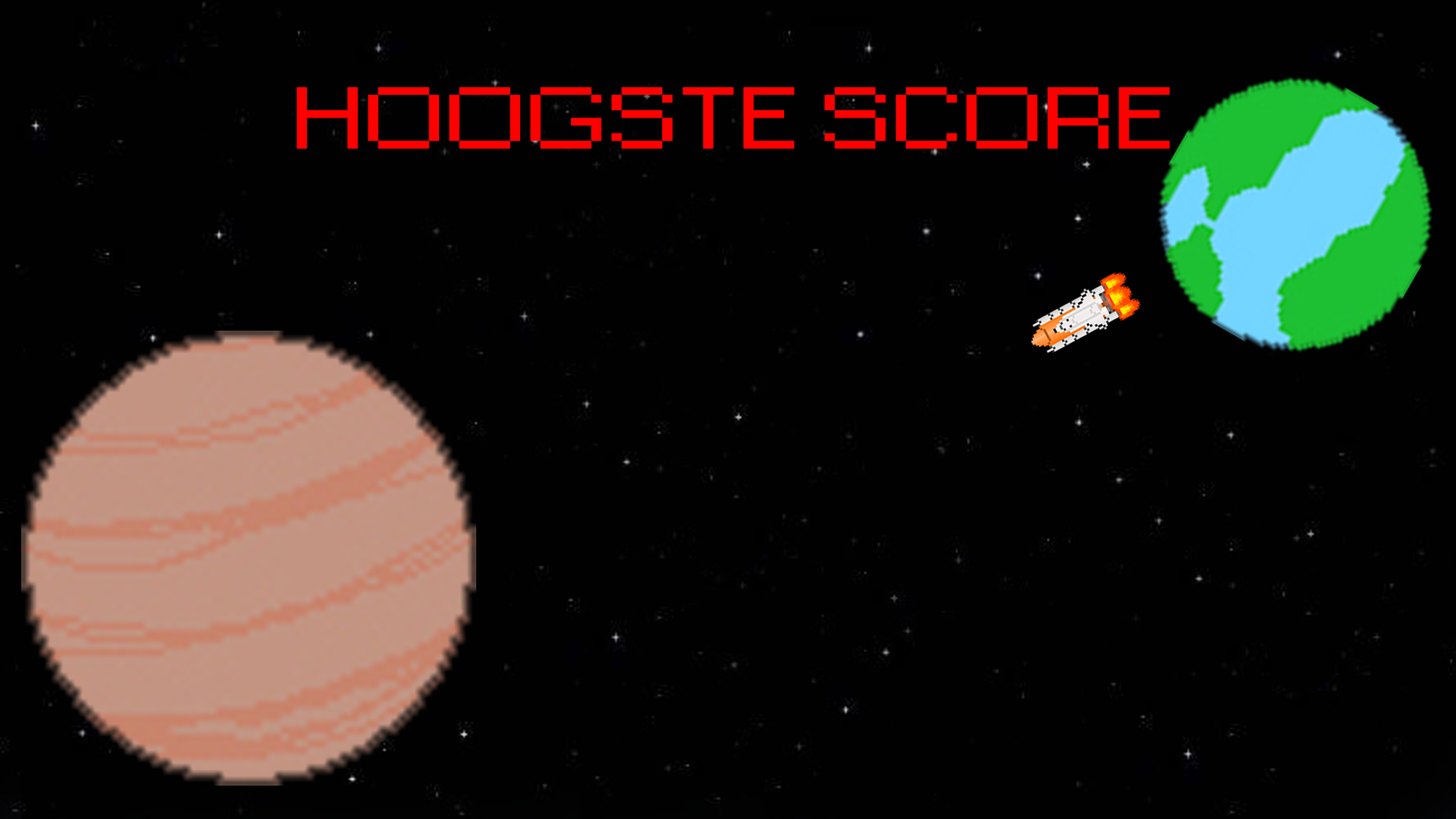
<style>
.page{position:relative;width:1456px;height:819px;background:#010101}
.page>*{position:absolute;margin:0}
.t1{font:82px "Small Fonts";color:#ff0000;scale:1.58 1}
</style>
<div class="page">
<p class="t1" style="left:297px;top:87px;width:873px;height:62px">HOOGSTE SCORE</p>
</div>
